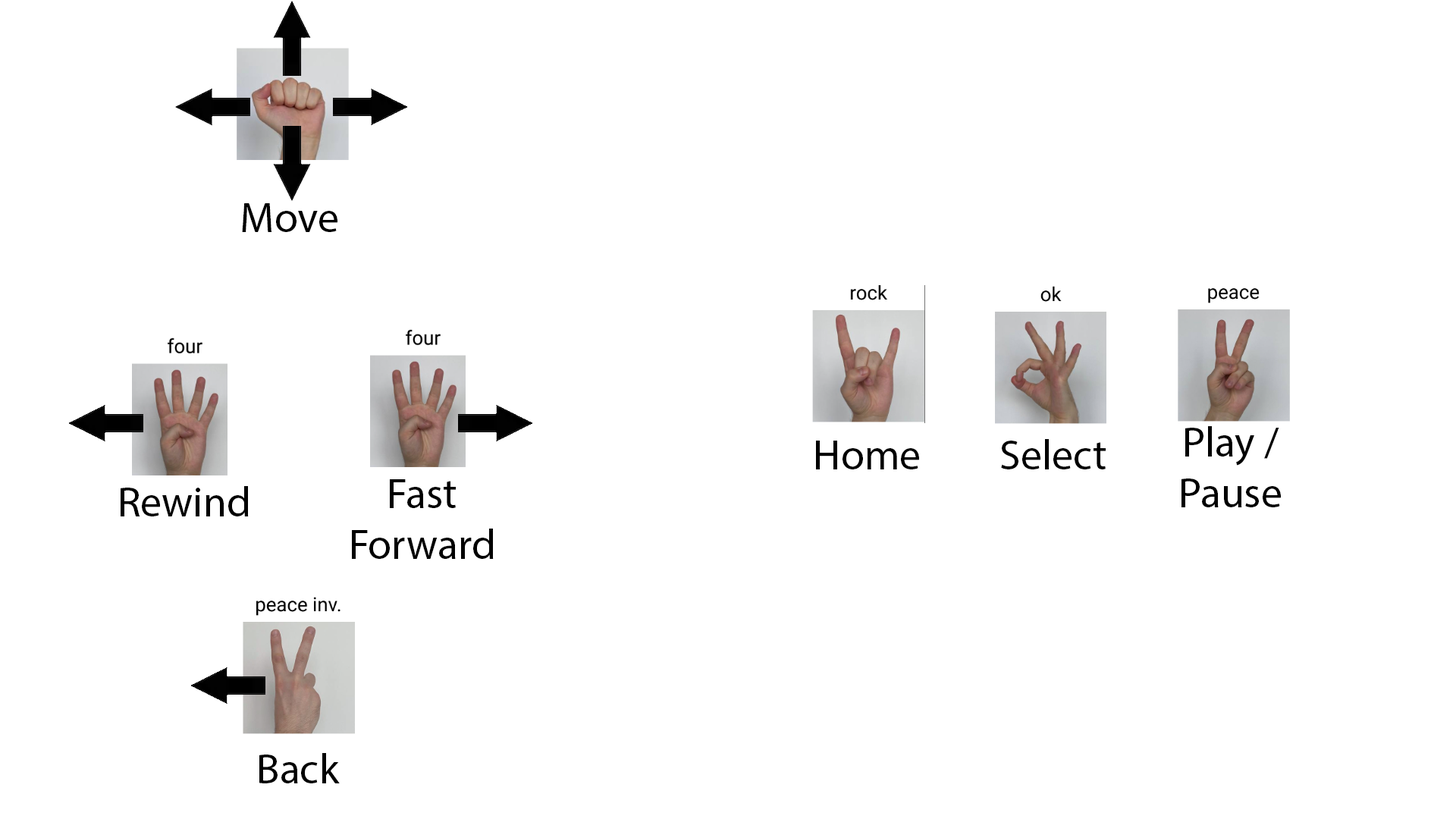
<style>
.page{position:relative;width:1456px;height:819px;background:#ffffff}
.page>*{position:absolute;margin:0}
.t1{font:42.5px "MyriadPro-Regular";color:#000000}
</style>
<div class="page">
<p class="t1" style="left:242px;top:203px;width:95px;height:29px">Move</p>
<p class="t1" style="left:1181px;top:426px;width:100px;height:81px;text-align:center">Play /<br>Pause</p>
<p class="t1" style="left:816px;top:441px;width:103px;height:28px">Home</p>
<p class="t1" style="left:1001px;top:439px;width:105px;height:30px">Select</p>
<p class="t1" style="left:352px;top:479px;width:142px;height:80px;text-align:center">Fast Forward</p>
<p class="t1" style="left:121px;top:486px;width:128px;height:30px">Rewind</p>
<p class="t1" style="left:259px;top:753px;width:81px;height:30px">Back</p>
</div>
